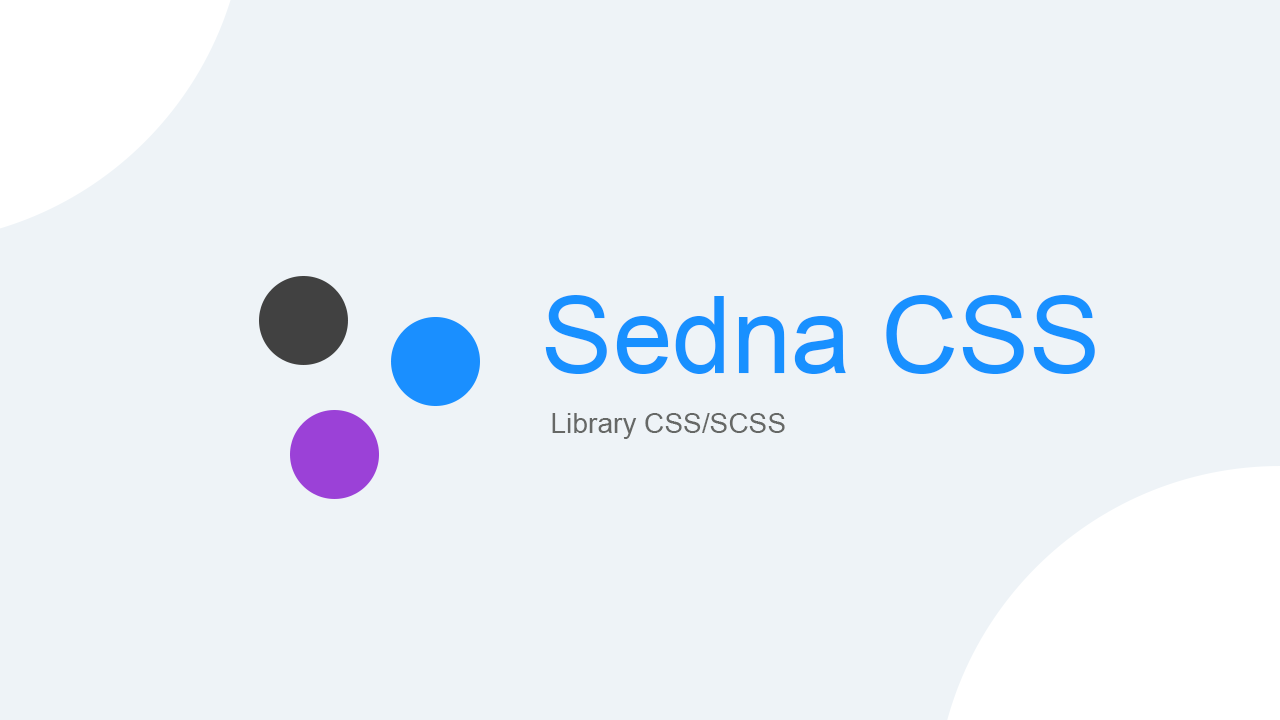
<style>
.page{position:relative;width:1280px;height:720px;background:#eef3f7}
.page>*{position:absolute;margin:0}
.t1{font:107.1px "ArialMT";color:#1890ff}
.t2{font:28.1px "ArialMT";color:#666766}
</style>
<div class="page">
<p class="t1" style="left:545px;top:295px;width:550px;height:79px">Sedna CSS</p>
<p class="t2" style="left:552px;top:413px;width:233px;height:26px">Library CSS/SCSS</p>
</div>
